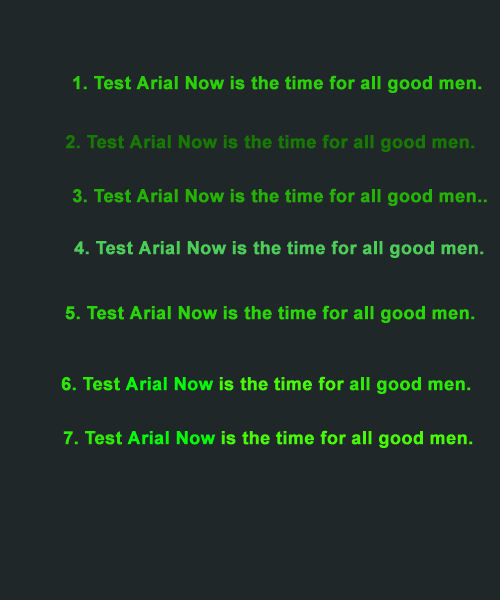
<style>
.page{position:relative;width:500px;height:600px;background:#202728}
.page>*{position:absolute;margin:0}
.t1{font:18px "Arial-BoldMT";color:#28d200;font-weight:bold}
.t2{font:18px "Arial-BoldMT";color:#167900;font-weight:bold}
.t3{font:18px "Arial-BoldMT";color:#22b400;font-weight:bold}
.t4{font:18px "Arial-BoldMT";color:#4bce57;font-weight:bold}
.t5{font:18px "Arial-BoldMT";color:#27d800;font-weight:bold}
.t6{font:18px "Arial-BoldMT";color:#45ff00;font-weight:bold}
.t7{font:18px "Arial-BoldMT";color:#2beb00;font-weight:bold}
.t8{font:18px "Arial-BoldMT";color:#00ff00;font-weight:bold}
</style>
<div class="page">
<p class="t1" style="left:73px;top:75px;width:409px;height:18px">1. Test Arial Now is the time for all good men.</p>
<p class="t2" style="left:65px;top:134px;width:410px;height:18px">2. Test Arial Now is the time for all good men.</p>
<p class="t3" style="left:72px;top:188px;width:415px;height:18px">3. Test Arial Now is the time for all good men..</p>
<p class="t4" style="left:74px;top:240px;width:410px;height:18px">4. Test Arial Now is the time for all good men.</p>
<p class="t5" style="left:65px;top:305px;width:410px;height:18px">5. Test Arial Now is the time for all good men.</p>
<p class="t6" style="left:61px;top:376px;width:410px;height:18px"><span class="t7">6. Test </span><span class="t8">Arial Now </span>is the time for<span class="t7"> all good men.</span></p>
<p class="t6" style="left:63px;top:430px;width:410px;height:18px"><span class="t7">7. Test </span><span class="t8">Arial Now </span>is the time for all good men.</p>
</div>
